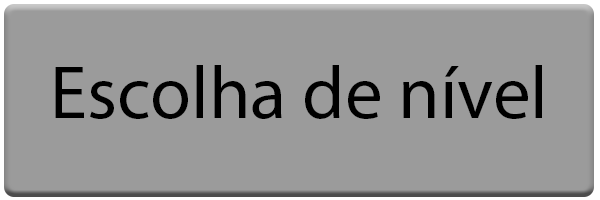
<style>
.page{position:relative;width:600px;height:200px;background:#9b9b9b}
.page>*{position:absolute;margin:0}
.t1{font:75px "MyriadPro-Regular";color:#000000}
</style>
<div class="page">
<p class="t1" style="left:55px;top:65px;width:487px;height:54px">Escolha de nível</p>
</div>
